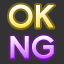
<style>
.page{position:relative;width:64px;height:64px;background:#333333}
.page>*{position:absolute;margin:0}
.t1{font:30px "FlorencesansBlack"}
</style>
<div class="page">
<p class="t1" style="left:9px;top:4px;width:46px;height:24px">OK</p>
<p class="t1" style="left:10px;top:35px;width:44px;height:24px">NG</p>
</div>
